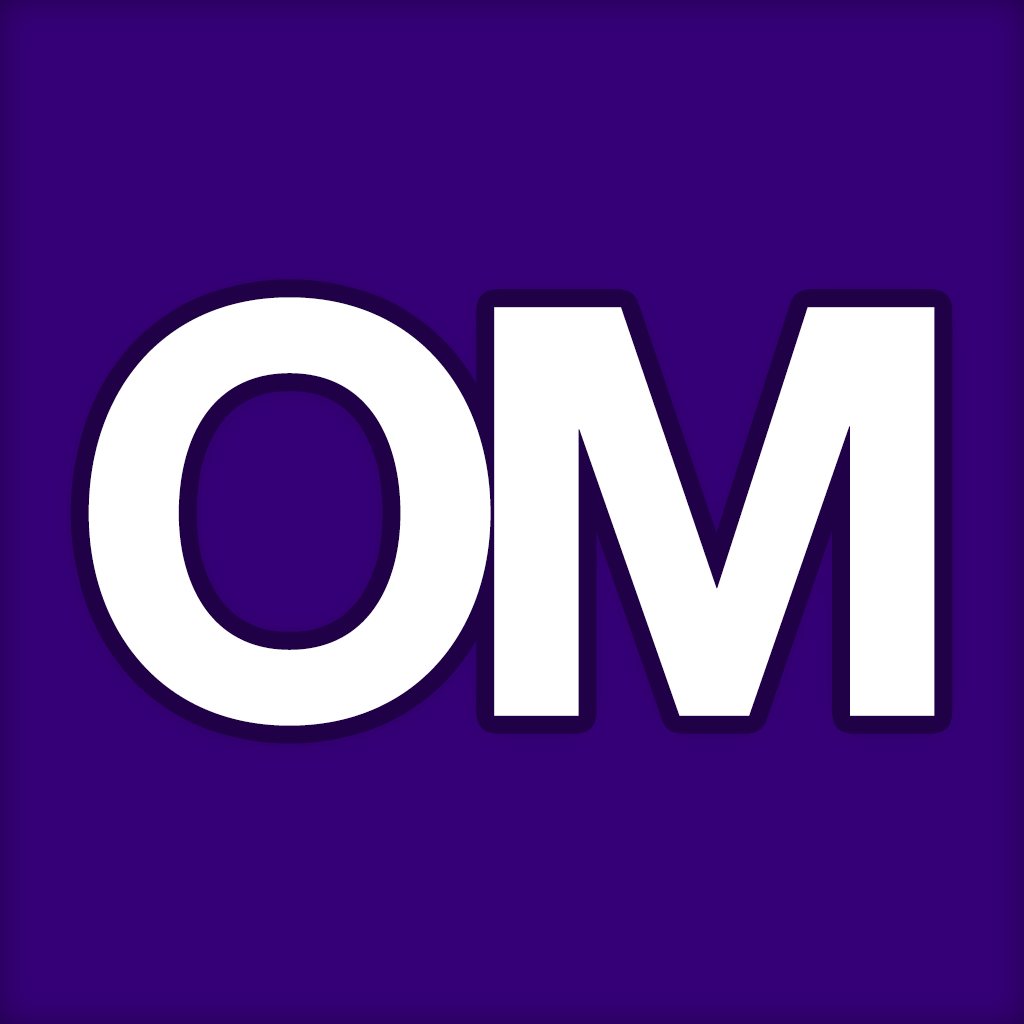
<style>
.page{position:relative;width:1024px;height:1024px;background:#350077}
.page>*{position:absolute;margin:0}
.t1{font:572px "HelveticaNeueLTPro-Bd";letter-spacing:-0.1em;color:#ffffff}
</style>
<div class="page">
<p class="t1" style="left:88px;top:297px;width:847px;height:429px">OM</p>
</div>
